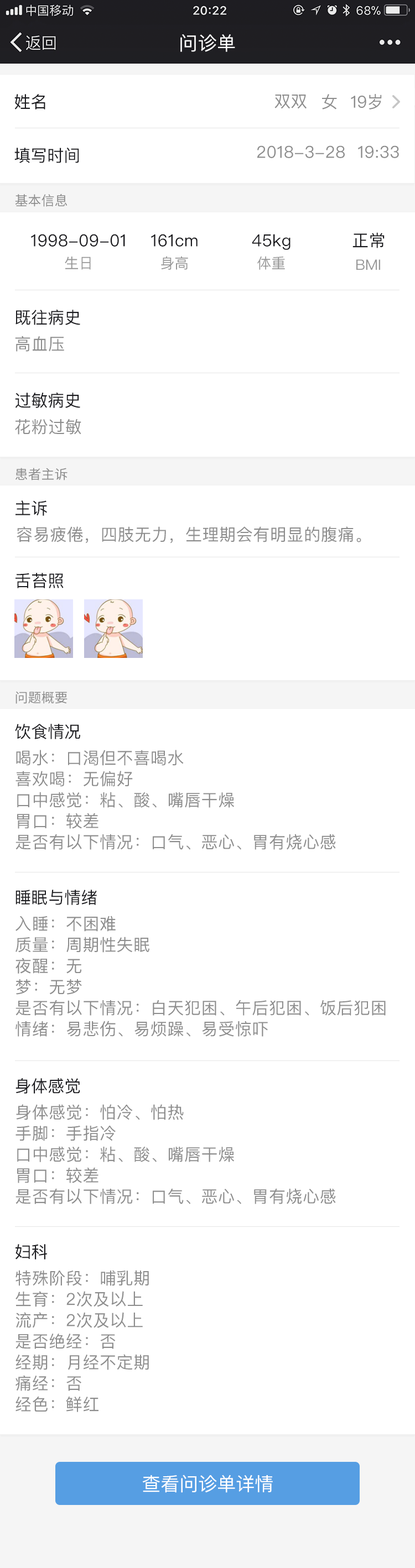
<style>
.page{position:relative;width:415px;height:1568px;background:#ffffff}
.page>*{position:absolute;margin:0}
.t1{font:18.8px "PingFangSC-Regular";letter-spacing:0.02em;color:#ffffff}
.t2{font:16.6px "PingFangSC-Regular";color:#1b1b1f}
.t3{font:16.6px "PingFangSC-Regular";color:#8d8d8d}
.t4{font:16.6px "PingFangSC-Regular";letter-spacing:0.02em;color:#8d8d8d}
.t5{font:13.3px "SourceHanSansCN-Regular";color:#8b8b8b}
.t6{font:16.6px "PingFangSC-Regular";letter-spacing:0.02em;color:#1b1b1f}
.t7{font:14.4px "PingFangSC-Regular";color:#979797}
.t8{font:16.6px/21px "PingFangSC-Regular";letter-spacing:0.02em;color:#8d8d8d}
.t9{font:18.8px "PingFangSC-Regular";color:#ffffff}
</style>
<div class="page">
<p class="t1" style="left:180px;top:34px;width:55px;height:18px">问诊单</p>
<p class="t2" style="left:14px;top:94px;width:31px;height:15px">姓名</p>
<p class="t3" style="left:274px;top:95px;width:32px;height:14px">双双</p>
<p class="t3" style="left:322px;top:94px;width:15px;height:15px">女</p>
<p class="t3" style="left:351px;top:94px;width:30px;height:15px">19岁</p>
<p class="t2" style="left:14px;top:148px;width:65px;height:15px">填写时间</p>
<p class="t4" style="left:257px;top:145px;width:142px;height:13px">2018-3-28  19:33</p>
<p class="t5" style="left:15px;top:194px;width:52px;height:13px">基本信息</p>
<p class="t6" style="left:31px;top:234px;width:94px;height:13px">1998-09-01</p>
<p class="t6" style="left:151px;top:234px;width:46px;height:13px">161cm</p>
<p class="t6" style="left:252px;top:234px;width:38px;height:16px">45kg</p>
<p class="t6" style="left:352px;top:232px;width:32px;height:16px">正常</p>
<p class="t7" style="left:65px;top:257px;width:26px;height:13px">生日</p>
<p class="t7" style="left:161px;top:256px;width:27px;height:14px">身高</p>
<p class="t7" style="left:257px;top:256px;width:28px;height:14px">体重</p>
<p class="t7" style="left:356px;top:259px;width:24px;height:11px">BMI</p>
<p class="t2" style="left:15px;top:310px;width:65px;height:15px">既往病史</p>
<p class="t4" style="left:15px;top:336px;width:49px;height:16px">高血压</p>
<p class="t2" style="left:15px;top:393px;width:65px;height:15px">过敏病史</p>
<p class="t4" style="left:15px;top:419px;width:66px;height:16px">花粉过敏</p>
<p class="t5" style="left:15px;top:468px;width:52px;height:12px">患者主诉</p>
<p class="t2" style="left:15px;top:500px;width:32px;height:16px">主诉</p>
<p class="t4" style="left:17px;top:526px;width:344px;height:17px">容易疲倦，四肢无力，生理期会有明显的腹痛。</p>
<p class="t2" style="left:15px;top:573px;width:49px;height:15px">舌苔照</p>
<p class="t5" style="left:15px;top:691px;width:52px;height:13px">问题概要</p>
<p class="t2" style="left:15px;top:724px;width:65px;height:15px">饮食情况</p>
<p class="t8" style="left:15px;top:750px;width:321px;height:100px">喝水：口渴但不喜喝水<br>喜欢喝：无偏好<br>口中感觉：粘、酸、嘴唇干燥<br>胃口：较差<br>是否有以下情况：口气、恶心、胃有烧心感</p>
<p class="t2" style="left:15px;top:890px;width:82px;height:15px">睡眠与情绪</p>
<p class="t8" style="left:15px;top:916px;width:370px;height:121px">入睡：不困难<br>质量：周期性失眠<br>夜醒：无<br>梦：无梦<br>是否有以下情况：白天犯困、午后犯困、饭后犯困<br>情绪：易悲伤、易烦躁、易受惊吓</p>
<p class="t2" style="left:15px;top:1078px;width:65px;height:16px">身体感觉</p>
<p class="t8" style="left:15px;top:1104px;width:321px;height:100px">身体感觉：怕冷、怕热<br>手脚：手指冷<br>口中感觉：粘、酸、嘴唇干燥<br>胃口：较差<br>是否有以下情况：口气、恶心、胃有烧心感</p>
<p class="t2" style="left:15px;top:1244px;width:32px;height:15px">妇科</p>
<p class="t8" style="left:15px;top:1270px;width:134px;height:142px">特殊阶段：哺乳期<br>生育：2次及以上<br>流产：2次及以上<br>是否绝经：否<br>经期：月经不定期<br>痛经：否<br>经色：鲜红</p>
<p class="t9" style="left:142px;top:1475px;width:131px;height:18px">查看问诊单详情</p>
</div>
